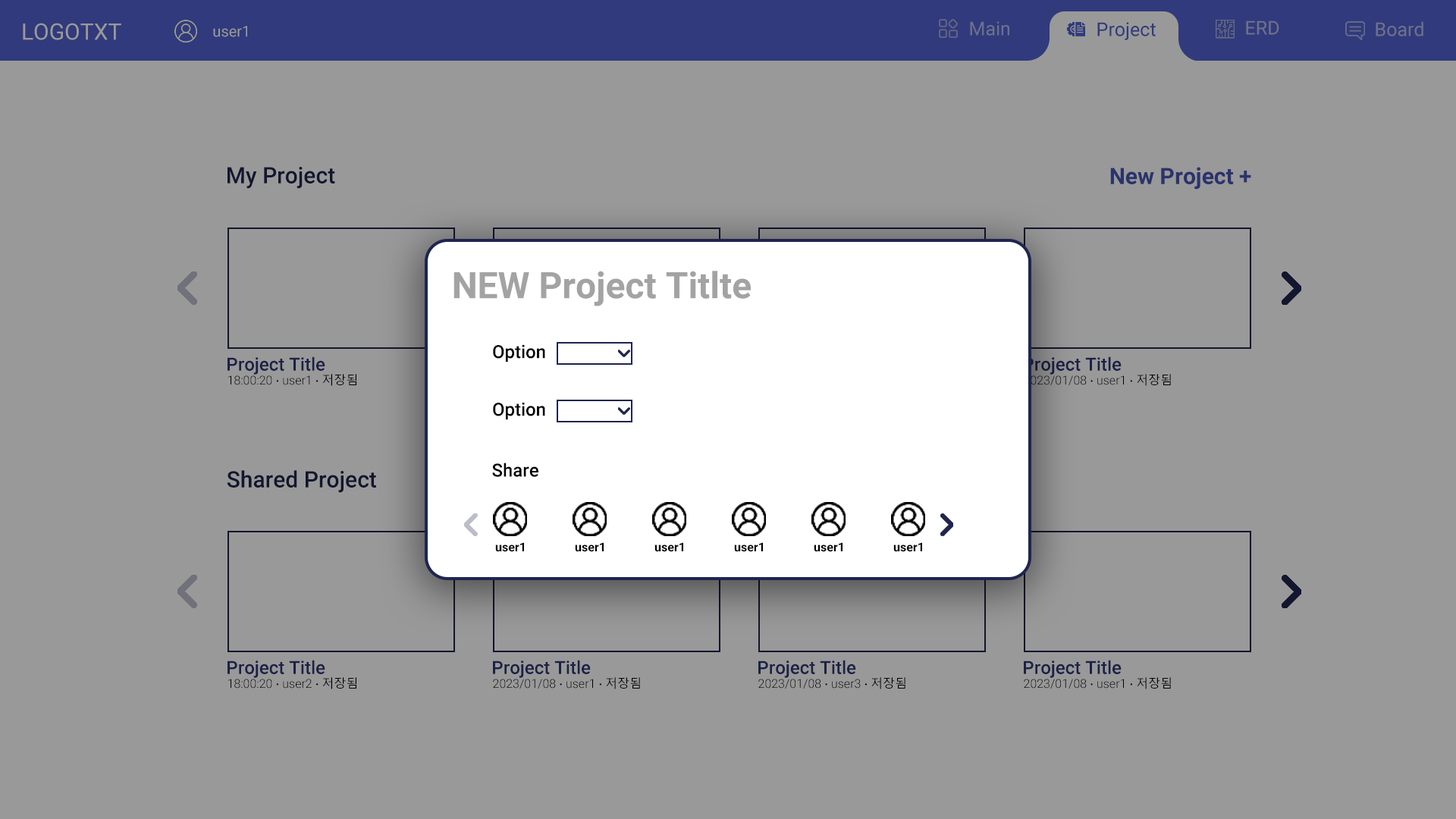
<style>
.page{position:relative;width:1456px;height:819px;background:#999999}
.page>*{position:absolute;margin:0}
.t1{font:22.7px "Roboto-Regular";color:#999999}
.t2{font:19px "Roboto-Regular";color:#6d708b}
.t3{font:19px "Roboto-Regular";color:#313a7c}
.t4{font:22.7px "Roboto-Medium";color:#13162f}
.t5{font:22.7px "Roboto-Bold";color:#2b336d}
.t6{font:36.4px "Roboto-Bold";color:#a3a3a3}
.t7{font:18.2px "Roboto-Medium";color:#000000}
.t8{font:18.2px "Roboto-Medium";color:#1c2146}
.t9{font:12.1px "Roboto-Light";color:#000000}
.t10{font:12.1px "MalgunGothic";color:#000000}
.t11{font:12.1px "Roboto-Bold";color:#000000}
</style>
<div class="page">
<p class="t1" style="left:23px;top:23px;width:98px;height:17px">LOGOTXT</p>
<p class="t2" style="left:970px;top:21px;width:39px;height:15px">Main</p>
<p class="t3" style="left:1097px;top:22px;width:59px;height:18px">Project</p>
<p class="t2" style="left:1246px;top:20px;width:33px;height:15px">ERD</p>
<p class="t2" style="left:1376px;top:21px;width:47px;height:15px">Board</p>
<p class="t4" style="left:227px;top:167px;width:108px;height:22px">My Project</p>
<p class="t5" style="left:1110px;top:167px;width:141px;height:23px">New Project +</p>
<p class="t6" style="left:453px;top:271px;width:298px;height:35px">NEW Project Titlte</p>
<p class="t7" style="left:493px;top:344px;width:52px;height:18px">Option</p>
<p class="t8" style="left:227px;top:356px;width:98px;height:19px">Project Title</p>
<p class="t8" style="left:1024px;top:356px;width:98px;height:19px">Project Title</p>
<p class="t9" style="left:228px;top:374px;width:128px;height:12px">18:00:20 <span class="t10">∙</span> user1 <span class="t10">∙ 저장됨</span></p>
<p class="t9" style="left:1024px;top:374px;width:147px;height:12px">2023/01/08 <span class="t10">∙</span> user1 <span class="t10">∙ 저장됨</span></p>
<p class="t7" style="left:493px;top:402px;width:52px;height:18px">Option</p>
<p class="t4" style="left:227px;top:470px;width:149px;height:23px">Shared Project</p>
<p class="t7" style="left:492px;top:463px;width:46px;height:14px">Share</p>
<p class="t11" style="left:495px;top:542px;width:29px;height:10px">user1</p>
<p class="t11" style="left:575px;top:542px;width:29px;height:10px">user1</p>
<p class="t11" style="left:654px;top:542px;width:29px;height:10px">user1</p>
<p class="t11" style="left:734px;top:542px;width:29px;height:10px">user1</p>
<p class="t11" style="left:814px;top:542px;width:28px;height:10px">user1</p>
<p class="t11" style="left:893px;top:542px;width:29px;height:10px">user1</p>
<p class="t8" style="left:227px;top:660px;width:98px;height:18px">Project Title</p>
<p class="t8" style="left:493px;top:660px;width:98px;height:18px">Project Title</p>
<p class="t8" style="left:758px;top:660px;width:98px;height:18px">Project Title</p>
<p class="t8" style="left:1024px;top:660px;width:98px;height:18px">Project Title</p>
<p class="t9" style="left:228px;top:677px;width:128px;height:12px">18:00:20 <span class="t10">∙</span> user2 <span class="t10">∙ 저장됨</span></p>
<p class="t9" style="left:493px;top:677px;width:147px;height:12px">2023/01/08 <span class="t10">∙</span> user1 <span class="t10">∙ 저장됨</span></p>
<p class="t9" style="left:758px;top:677px;width:147px;height:12px">2023/01/08 <span class="t10">∙</span> user3 <span class="t10">∙ 저장됨</span></p>
<p class="t9" style="left:1024px;top:677px;width:147px;height:12px">2023/01/08 <span class="t10">∙</span> user1 <span class="t10">∙ 저장됨</span></p>
</div>
